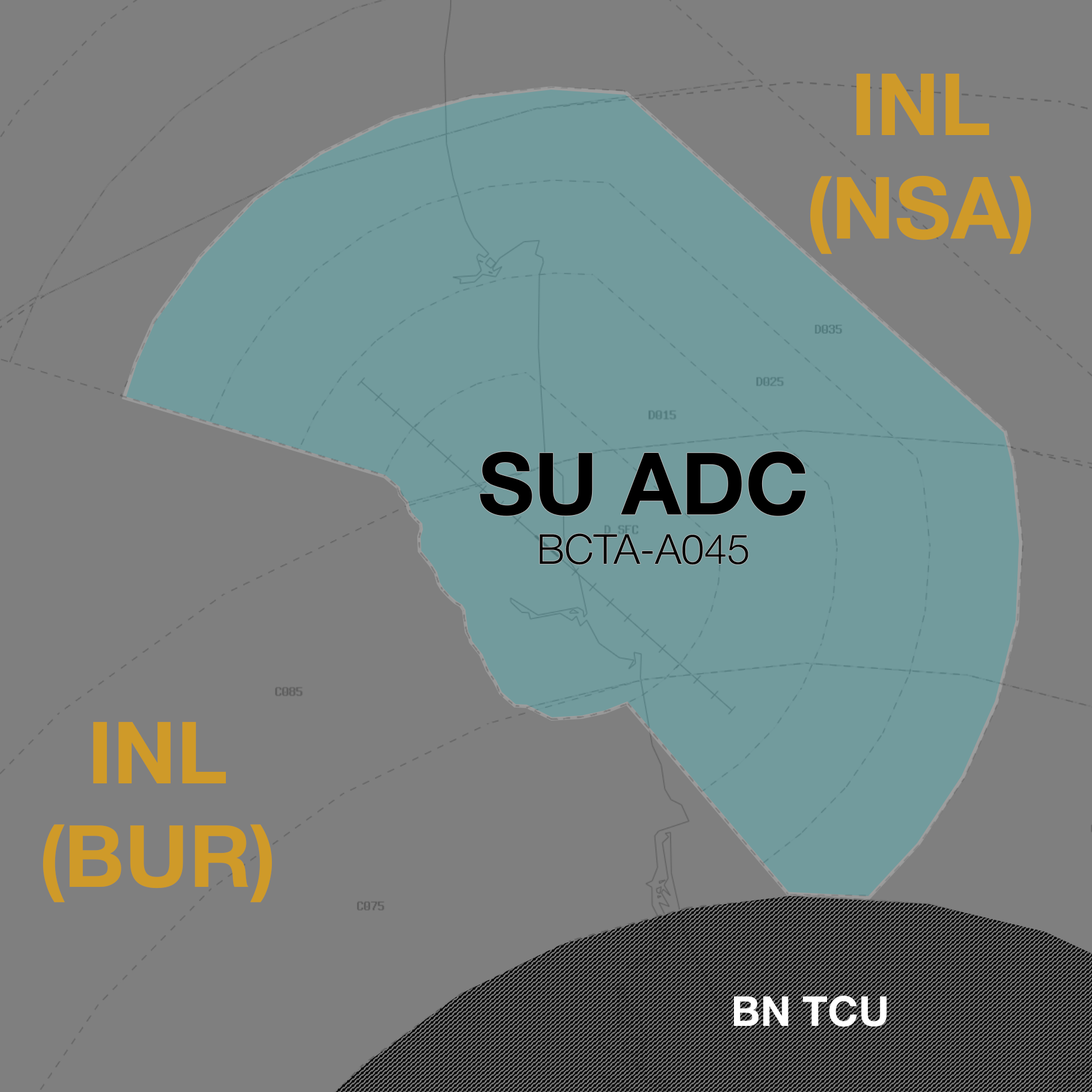
<style>
.page{position:relative;width:1092px;height:1092px;background:#7f7f7f}
.page>*{position:absolute;margin:0}
.t1{font:86.2px "HelveticaNeue-Bold";color:#cf9a29}
.t2{font:41.4px "HelveticaNeue-Light";color:#000000}
.t3{font:86.2px "HelveticaNeue-Bold";color:#000000}
.t4{font:41.4px "HelveticaNeue-Bold";color:#ffffff}
</style>
<div class="page">
<p class="t1" style="left:810px;top:74px;width:222px;height:180px;text-align:center">INL<br>(NSA)</p>
<p class="t2" style="left:480px;top:451px;width:326px;height:114px;text-align:center"><span class="t3">SU ADC<br></span>BCTA-A045</p>
<p class="t1" style="left:43px;top:722px;width:229px;height:180px;text-align:center">INL<br>(BUR)</p>
<p class="t4" style="left:734px;top:995px;width:153px;height:32px">BN TCU</p>
</div>
